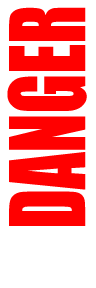
<style>
.page{position:relative;width:96px;height:288px;background:#ffffff}
.page>*{position:absolute;margin:0}
.t1{font:96px "Impact";color:#ff0000;scale:0.75 1}
</style>
<div class="page">
<p class="t1" style="left:7px;top:7px;width:80px;height:219px;rotate:-90deg">DANGER</p>
</div>
